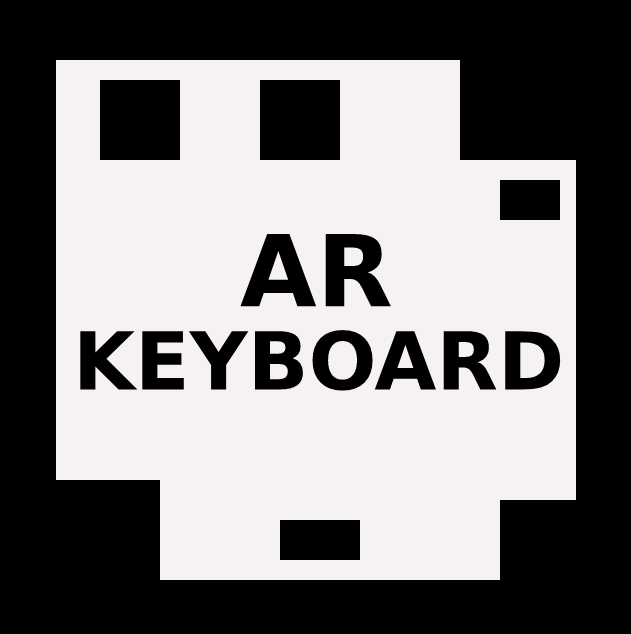
<style>
.page{position:relative;width:631px;height:634px;background:#f7f2f2}
.page>*{position:absolute;margin:0}
.t1{font:99px "DejaVuSans-Bold";color:#000000}
.t2{font:80px "DejaVuSans-Bold";color:#000000}
</style>
<div class="page">
<p class="t1" style="left:240px;top:234px;width:151px;height:73px">AR</p>
<p class="t2" style="left:80px;top:330px;width:481px;height:61px">KEYBOARD</p>
</div>
